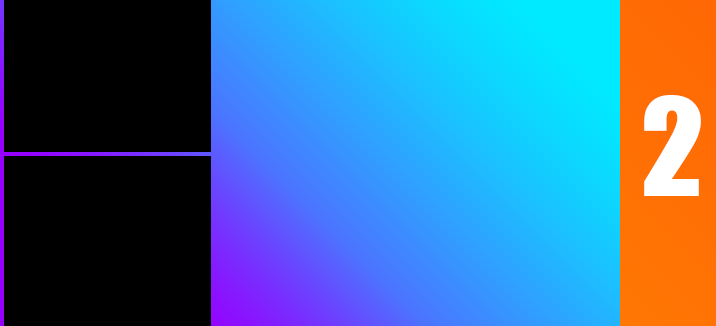
<style>
.page{position:relative;width:716px;height:326px;background:#000000}
.page>*{position:absolute;margin:0}
.t1{font:125px "Impact";color:#ffffff}
</style>
<div class="page">
<p class="t1" style="left:644px;top:95px;width:57px;height:101px">2</p>
</div>
